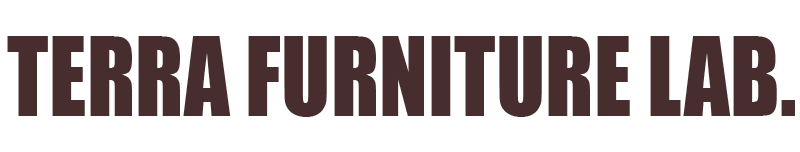
<style>
.page{position:relative;width:800px;height:152px;background:#ffffff}
.page>*{position:absolute;margin:0}
.t1{font:100.6px "Impact";color:#472d2d;scale:0.9 1}
</style>
<div class="page">
<p class="t1" style="left:7px;top:36px;width:788px;height:81px">TERRA FURNITURE LAB.</p>
</div>
